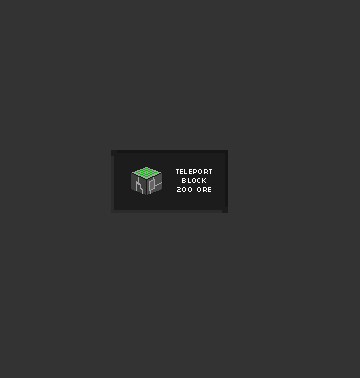
<style>
.page{position:relative;width:360px;height:378px;background:#333333}
.page>*{position:absolute;margin:0}
.t1{font:8px/9px "04b03";letter-spacing:0.04em;color:#ffffff}
</style>
<div class="page">
<p class="t1" style="left:176px;top:169px;width:36px;height:23px;text-align:center">TELEPORT<br>BLOCK<br>200 ORE</p>
</div>
